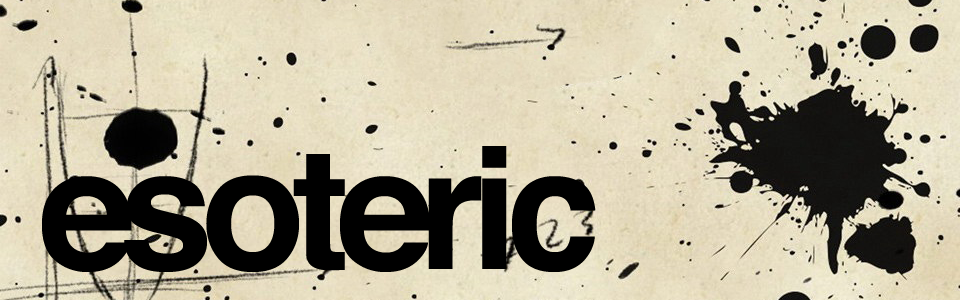
<style>
.page{position:relative;width:960px;height:300px}
.page>*{position:absolute;margin:0}
.t1{font:170px "Helvetica-Bold";letter-spacing:-0.075em;color:#000000}
</style>
<div class="page">
<p class="t1" style="left:42px;top:146px;width:554px;height:126px">esoteric</p>
</div>
